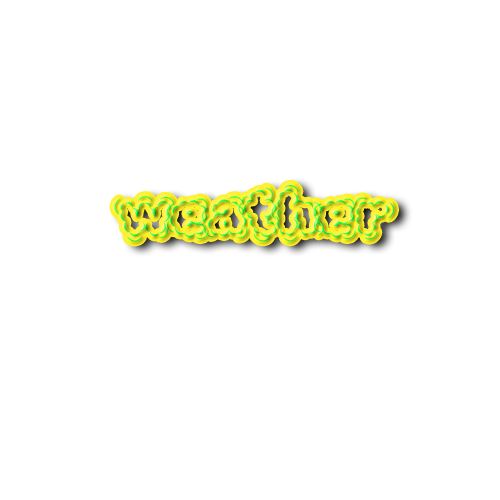
<style>
.page{position:relative;width:500px;height:500px;background:#ffffff}
.page>*{position:absolute;margin:0}
.t1{font:60px "RubikPuddles-Regular"}
</style>
<div class="page">
<p class="t1" style="left:114px;top:185px;width:280px;height:57px">weather</p>
</div>
